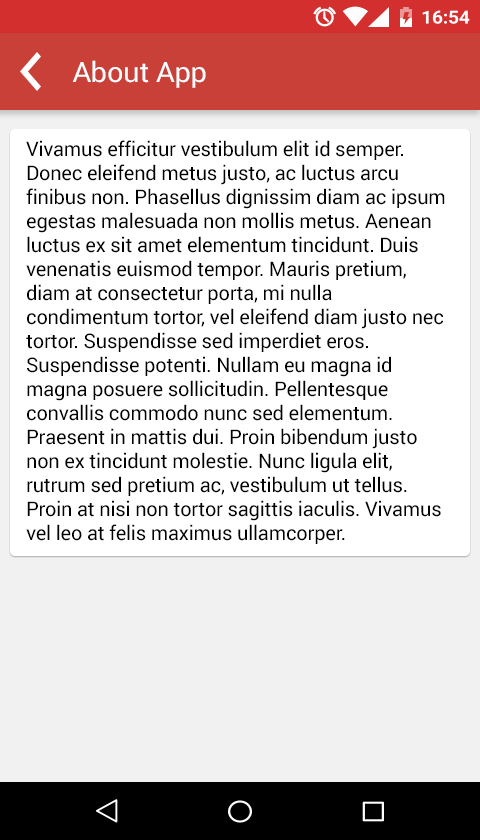
<style>
.page{position:relative;width:480px;height:840px;background:#ffffff}
.page>*{position:absolute;margin:0}
.t1{font:28.1px "Roboto-Regular";letter-spacing:-0.01em;color:#ffffff;scale:1.03 1}
.t2{font:20px "Roboto-Regular";letter-spacing:-0.01em;color:#000000}
</style>
<div class="page">
<p class="t1" style="left:72px;top:60px;width:134px;height:28px">About App</p>
<p class="t2" style="left:26px;top:140px;width:419px;height:404px">Vivamus efficitur vestibulum elit id semper. Donec eleifend metus justo, ac luctus arcu finibus non. Phasellus dignissim diam ac ipsum egestas malesuada non mollis metus. Aenean luctus ex sit amet elementum tincidunt. Duis venenatis euismod tempor. Mauris pretium, diam at consectetur porta, mi nulla condimentum tortor, vel eleifend diam justo nec tortor. Suspendisse sed imperdiet eros. Suspendisse potenti. Nullam eu magna id magna posuere sollicitudin. Pellentesque convallis commodo nunc sed elementum. Praesent in mattis dui. Proin bibendum justo non ex tincidunt molestie. Nunc ligula elit, rutrum sed pretium ac, vestibulum ut tellus. Proin at nisi non tortor sagittis iaculis. Vivamus vel leo at felis maximus ullamcorper.</p>
</div>
